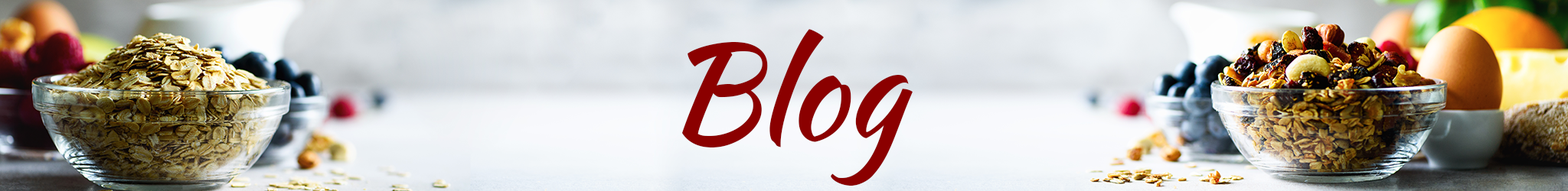
<style>
.page{position:relative;width:1568px;height:191px}
.page>*{position:absolute;margin:0}
.t1{font:130.2px "KaushanScript-Regular";color:#8b0000}
</style>
<div class="page">
<p class="t1" style="left:681px;top:29px;width:232px;height:157px">Blog</p>
</div>
